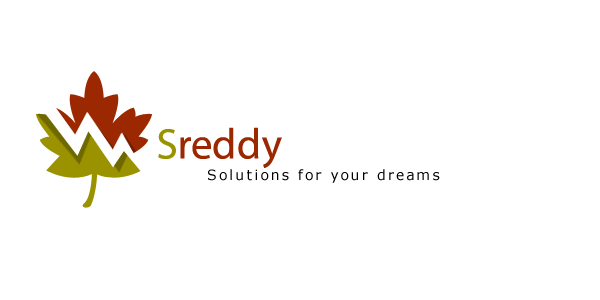
<style>
.page{position:relative;width:600px;height:300px;background:#ffffff}
.page>*{position:absolute;margin:0}
.t1{font:43px "MyriadPro-Regular";color:#9b2800}
.t2{font:43px "MyriadPro-Regular";color:#9b9200}
.t3{font:14px "Verdana";letter-spacing:0.15em;color:#000000}
</style>
<div class="page">
<p class="t1" style="left:158px;top:127px;width:124px;height:41px"><span class="t2">S</span>reddy</p>
<p class="t3" style="left:208px;top:169px;width:232px;height:14px">Solutions for your dreams</p>
</div>
